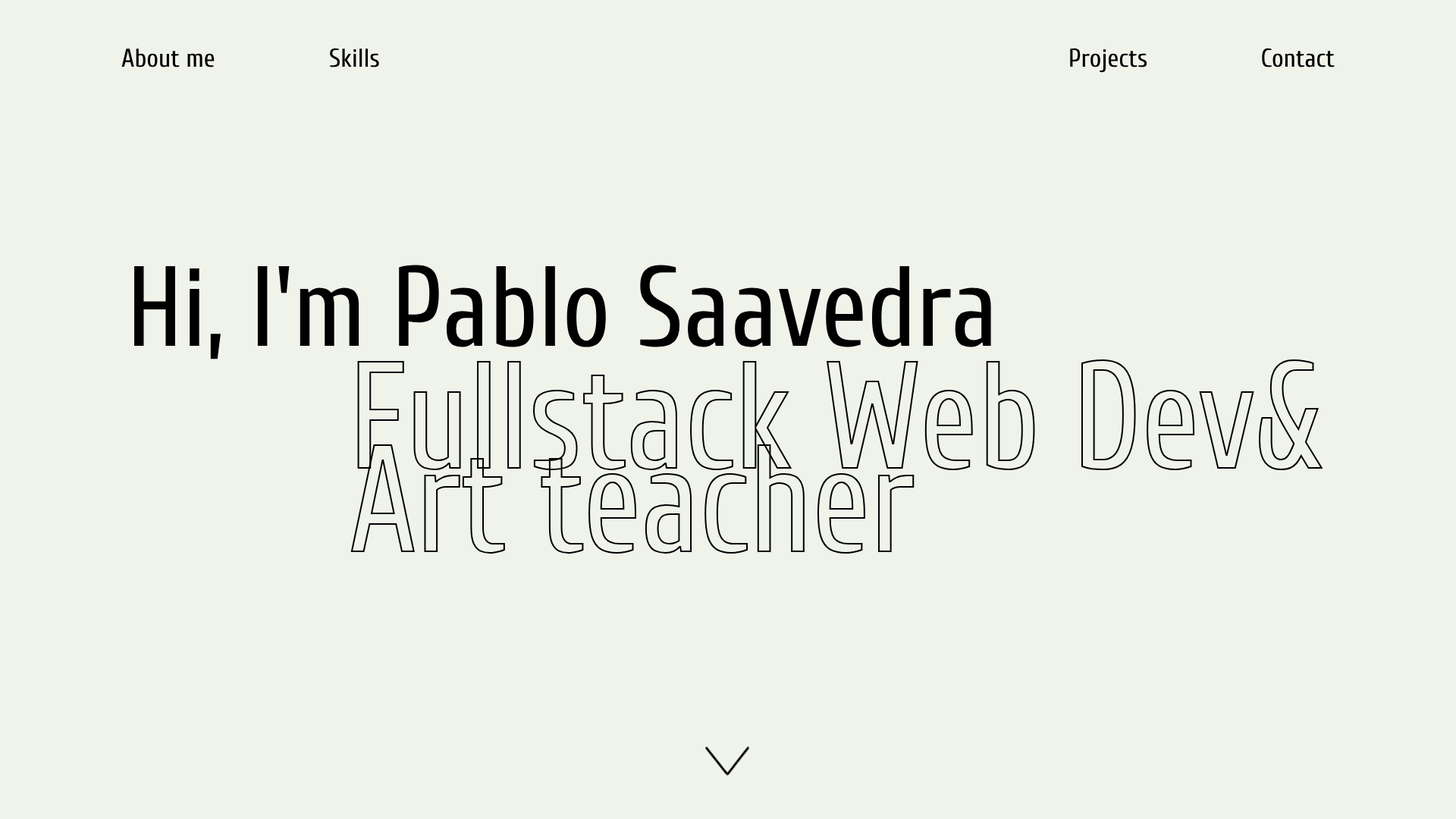
<style>
.page{position:relative;width:1456px;height:819px;background:#eff3ea}
.page>*{position:absolute;margin:0}
.t1{font:25.8px "Cuprum-Regular";color:#000000}
.t2{font:113.7px "Cuprum-Regular";color:#000000;scale:0.92 1}
.t3{font:151.7px/83.4px "Cuprum-Regular";color:#000000;scale:0.87 1}
</style>
<div class="page">
<p class="t1" style="left:121px;top:49px;width:94px;height:18px">About me</p>
<p class="t1" style="left:330px;top:48px;width:49px;height:19px">Skills</p>
<p class="t1" style="left:1070px;top:48px;width:77px;height:25px">Projects</p>
<p class="t1" style="left:1262px;top:48px;width:73px;height:19px">Contact</p>
<p class="t2" style="left:134px;top:265px;width:857px;height:94px">Hi, I'm Pablo Saavedra</p>
<p class="t3" style="left:350px;top:359px;width:973px;height:195px">Fullstack Web Dev&amp;<br>Art teacher</p>
</div>
